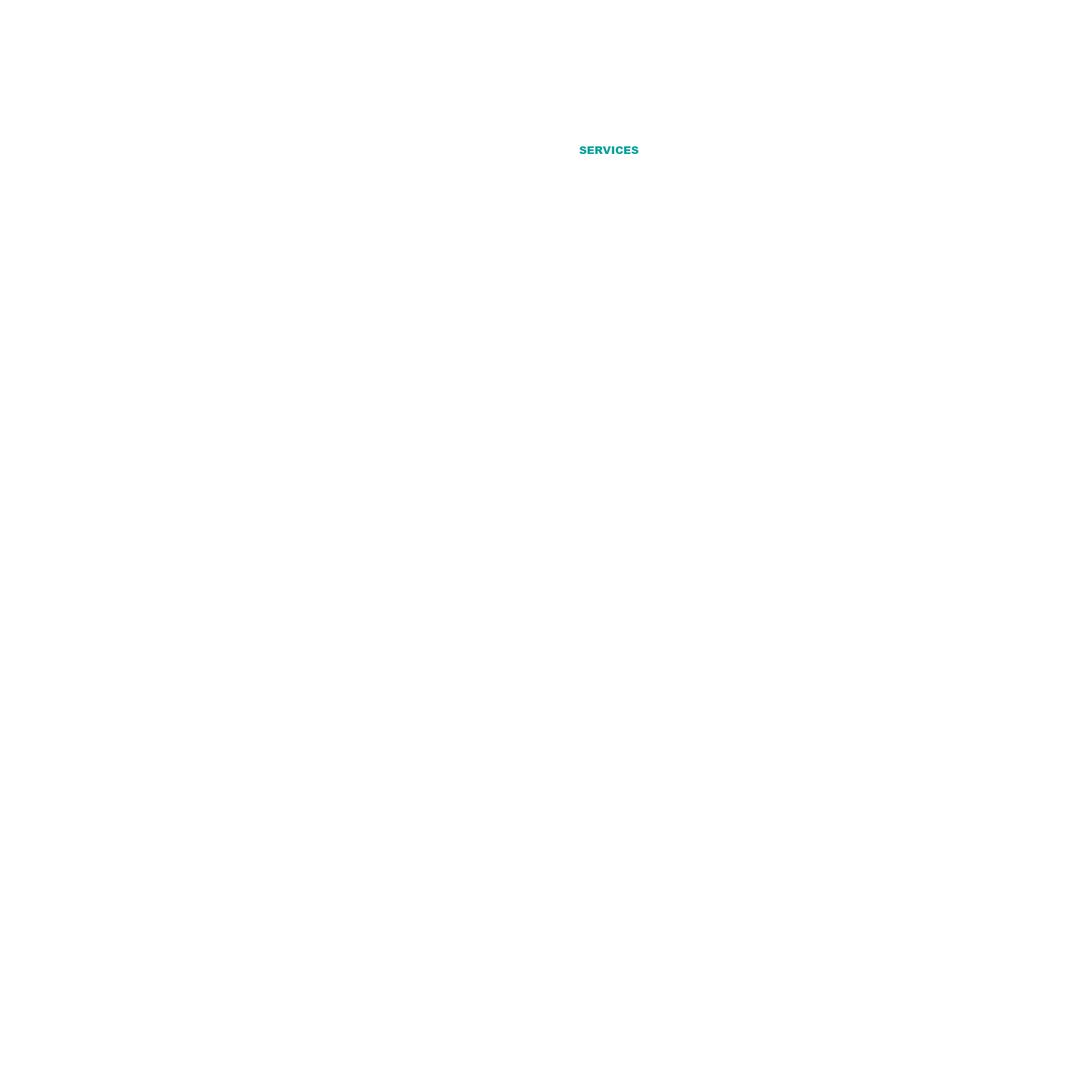
<style>
.page{position:relative;width:1092px;height:1092px;background:#ffffff}
.page>*{position:absolute;margin:0}
.t1{font:10.6px "Arial-Black";color:#0ba39c}
</style>
<div class="page">
<p class="t1" style="left:579px;top:146px;width:60px;height:8px">SERVICES</p>
</div>
